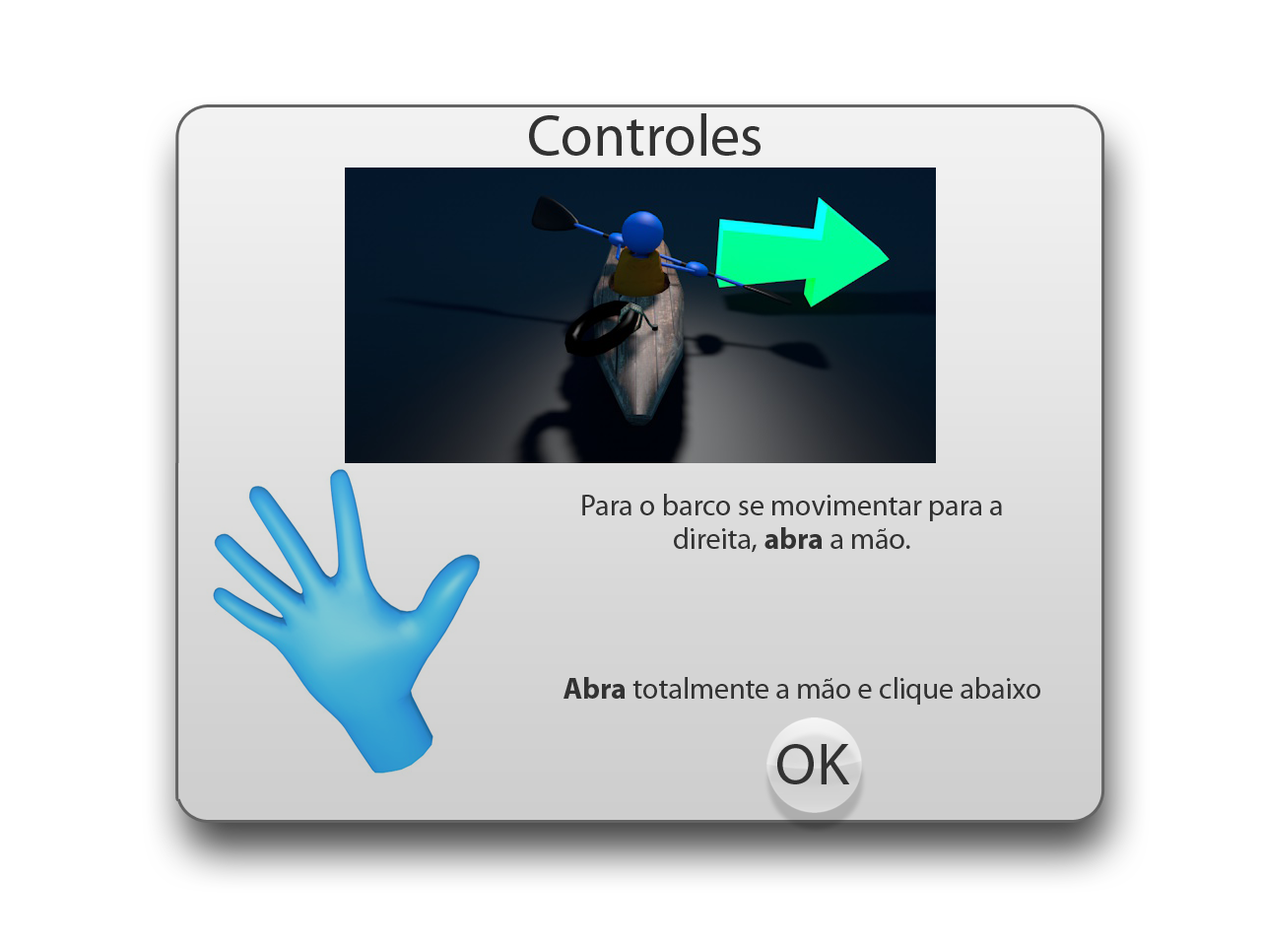
<style>
.page{position:relative;width:1261px;height:946px;background:#ffffff}
.page>*{position:absolute;margin:0}
.t1{font:59.1px "MyriadPro-Regular";color:#323232}
.t2{font:29.6px/16.7px "MyriadPro-Regular";color:#323232}
.t3{font:29.6px/16.7px "MyriadPro-Bold";color:#323232}
.t4{font:29.6px "MyriadPro-Regular";color:#323232}
.t5{font:29.6px "MyriadPro-Bold";color:#323232}
</style>
<div class="page">
<p class="t1" style="left:529px;top:113px;width:231px;height:43px">Controles</p>
<p class="t2" style="left:582px;top:494px;width:420px;height:59px;text-align:center">Para o barco se movimentar para a<br><br>direita, <span class="t3">abra</span> a mão.</p>
<p class="t4" style="left:563px;top:677px;width:477px;height:27px"><span class="t5">Abra</span> totalmente a mão e clique abaixo</p>
</div>
